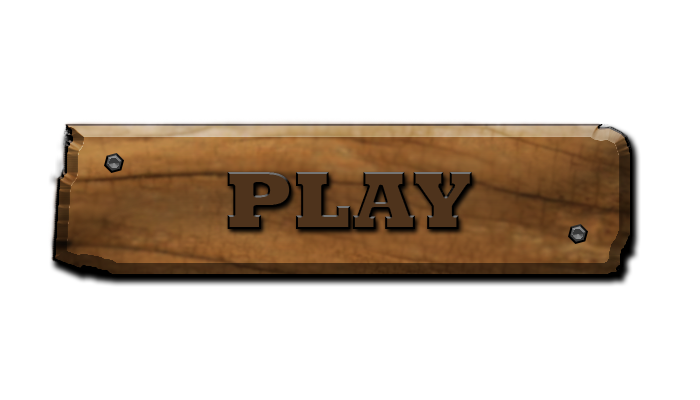
<style>
.page{position:relative;width:700px;height:400px;background:#ffffff}
.page>*{position:absolute;margin:0}
.t1{font:84px "Rockwell-ExtraBold";color:#4e331c}
</style>
<div class="page">
<p class="t1" style="left:227px;top:172px;width:245px;height:57px">PLAY</p>
</div>
